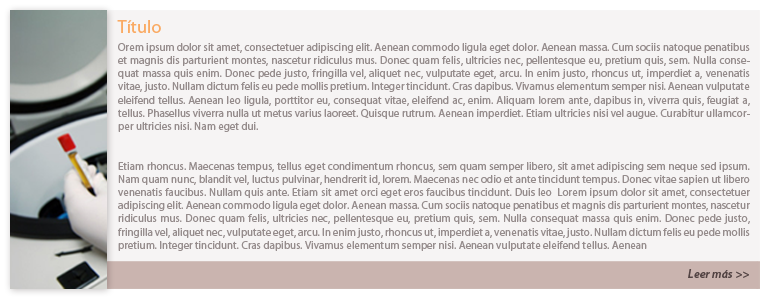
<style>
.page{position:relative;width:770px;height:300px;background:#f6f4f4}
.page>*{position:absolute;margin:0}
.t1{font:18px "MyriadPro-Regular";color:#faaa63}
.t2{font:11px "MyriadPro-Regular";color:#968d8d}
.t3{font:12px "MyriadPro-SemiboldIt";color:#524343}
</style>
<div class="page">
<p class="t1" style="left:117px;top:20px;width:44px;height:13px">Título</p>
<p class="t2" style="left:118px;top:43px;width:632px;height:208px;text-align:justify">Orem ipsum dolor sit amet, consectetuer adipiscing elit. Aenean commodo ligula eget dolor. Aenean massa. Cum sociis natoque penatibus et magnis dis parturient montes, nascetur ridiculus mus. Donec quam felis, ultricies nec, pellentesque eu, pretium quis, sem. Nulla consequat massa quis enim. Donec pede justo, fringilla vel, aliquet nec, vulputate eget, arcu. In enim justo, rhoncus ut, imperdiet a, venenatis vitae, justo. Nullam dictum felis eu pede mollis pretium. Integer tincidunt. Cras dapibus. Vivamus elementum semper nisi. Aenean vulputate eleifend tellus. Aenean leo ligula, porttitor eu, consequat vitae, eleifend ac, enim. Aliquam lorem ante, dapibus in, viverra quis, feugiat a, tellus. Phasellus viverra nulla ut metus varius laoreet. Quisque rutrum. Aenean imperdiet. Etiam ultricies nisi vel augue. Curabitur ullamcorper ultricies nisi. Nam eget dui.<br><br><br>Etiam rhoncus. Maecenas tempus, tellus eget condimentum rhoncus, sem quam semper libero, sit amet adipiscing sem neque sed ipsum. Nam quam nunc, blandit vel, luctus pulvinar, hendrerit id, lorem. Maecenas nec odio et ante tincidunt tempus. Donec vitae sapien ut libero venenatis faucibus. Nullam quis ante. Etiam sit amet orci eget eros faucibus tincidunt. Duis leo  Lorem ipsum dolor sit amet, consectetuer adipiscing elit. Aenean commodo ligula eget dolor. Aenean massa. Cum sociis natoque penatibus et magnis dis parturient montes, nascetur ridiculus mus. Donec quam felis, ultricies nec, pellentesque eu, pretium quis, sem. Nulla consequat massa quis enim. Donec pede justo, fringilla vel, aliquet nec, vulputate eget, arcu. In enim justo, rhoncus ut, imperdiet a, venenatis vitae, justo. Nullam dictum felis eu pede mollis pretium. Integer tincidunt. Cras dapibus. Vivamus elementum semper nisi. Aenean vulputate eleifend tellus. Aenean</p>
<p class="t3" style="left:688px;top:269px;width:61px;height:9px">Leer más &gt;&gt;</p>
</div>
